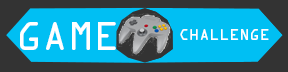
<style>
.page{position:relative;width:288px;height:72px;background:#00bff3}
.page>*{position:absolute;margin:0}
.t1{font:36px "OCRAStd";color:#ffffff}
.t2{font:14px "OCRAStd";color:#ffffff}
</style>
<div class="page">
<p class="t1" style="left:20px;top:22px;width:96px;height:28px">GAME</p>
<p class="t2" style="left:180px;top:29px;width:89px;height:11px">CHALLENGE</p>
</div>
